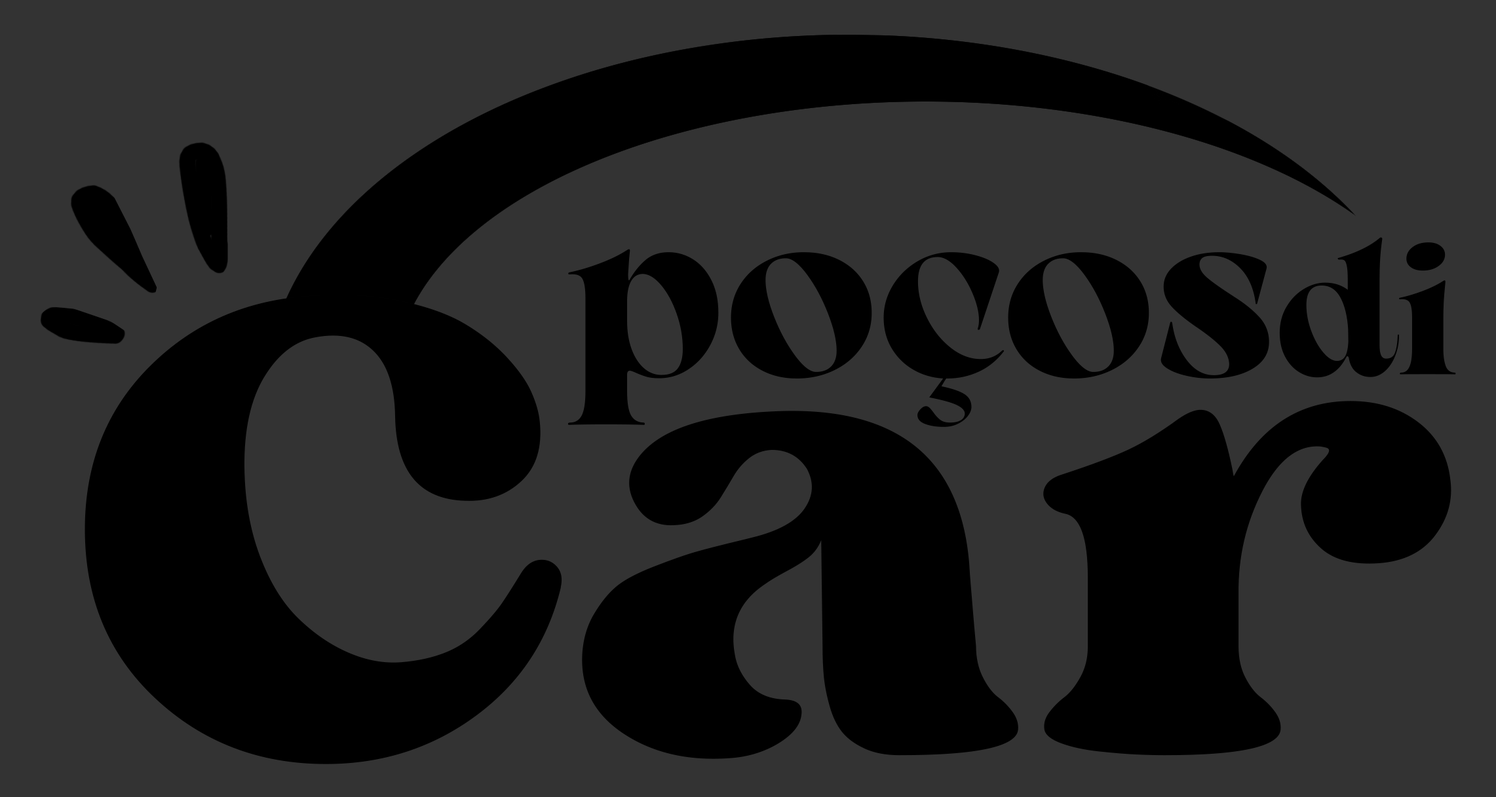
<style>
.page{position:relative;width:1496px;height:797px;background:#333333}
.page>*{position:absolute;margin:0}
.t1{font:252.1px "ArsenicaTrial-Bold";color:#000000}
.t2{font:189.1px "ArsenicaTrial-Bold";color:#000000}
.t3{font:678.8px "SergioTrendy-Regular";color:#000000}
</style>
<div class="page">
<p class="t1" style="left:567px;top:237px;width:889px;height:190px">poços<span class="t2">di</span></p>
<p class="t3" style="left:85px;top:295px;width:1366px;height:470px">Car</p>
</div>
